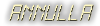
<style>
.page{position:relative;width:100px;height:26px}
.page>*{position:absolute;margin:0}
.t1{font:24.9px "Digital-7Italic";font-style:italic}
</style>
<div class="page">
<p class="t1" style="left:9px;top:4px;width:85px;height:17px">annulla</p>
<p class="t1" style="left:9px;top:4px;width:85px;height:17px">annulla</p>
</div>
